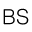
<style>
.page{position:relative;width:32px;height:32px;background:#ffffff}
.page>*{position:absolute;margin:0}
.t1{font:20.8px "Pragmatica-ExtraLight";color:#000000}
</style>
<div class="page">
<p class="t1" style="left:3px;top:8px;width:26px;height:17px">BS</p>
</div>
